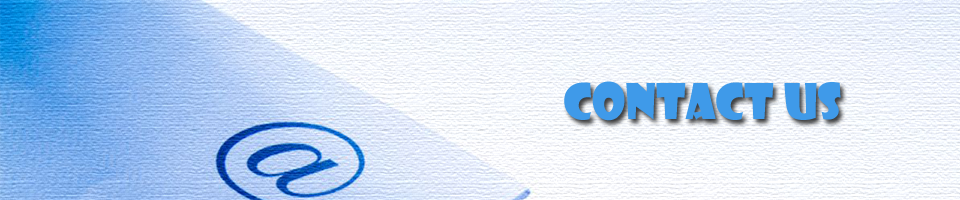
<style>
.page{position:relative;width:960px;height:200px}
.page>*{position:absolute;margin:0}
.t1{font:48px "ShowcardGothic-Reg";color:#3f9ae9}
</style>
<div class="page">
<p class="t1" style="left:564px;top:81px;width:277px;height:40px">CONTACT US</p>
</div>
